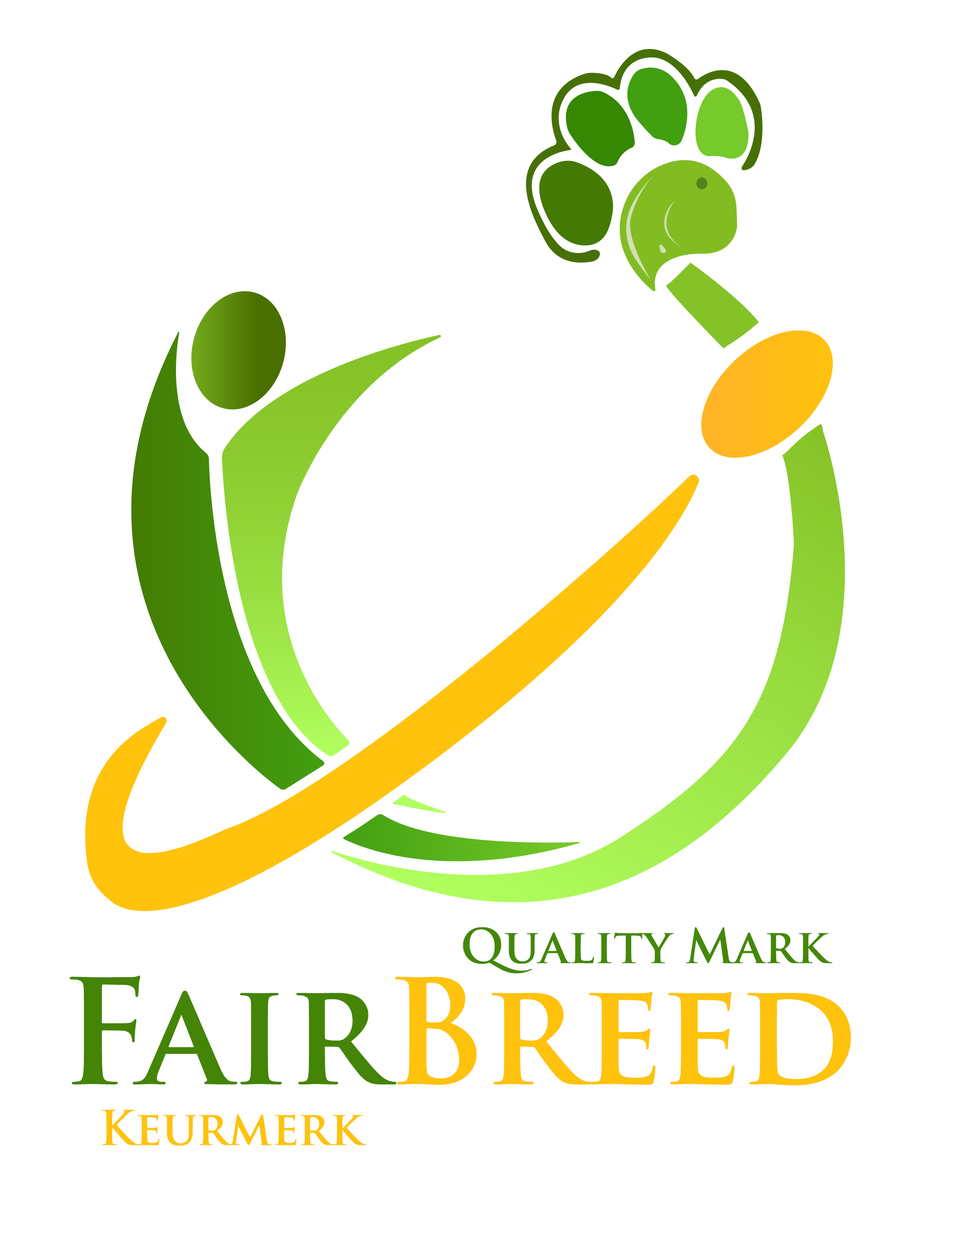
<style>
.page{position:relative;width:963px;height:1239px;background:#ffffff}
.page>*{position:absolute;margin:0}
.t1{font:46.8px "TrajanPro-Bold";color:#438808}
.t2{font:142.2px "TrajanPro-Bold";color:#ffc20d}
.t3{font:142.2px "TrajanPro-Bold";color:#448406}
.t4{font:46.8px "TrajanPro-Bold";color:#ffc20d}
</style>
<div class="page">
<p class="t1" style="left:463px;top:927px;width:369px;height:46px">Quality Mark</p>
<p class="t2" style="left:69px;top:975px;width:782px;height:110px"><span class="t3">Fair</span>Breed</p>
<p class="t4" style="left:102px;top:1110px;width:264px;height:36px">Keurmerk</p>
</div>
